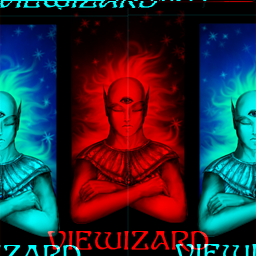
<style>
.page{position:relative;width:256px;height:256px;background:#000000}
.page>*{position:absolute;margin:0}
.t1{font:22.7px "EddaCaps";letter-spacing:0.1em;text-transform:uppercase;font-weight:bold}
</style>
<div class="page">
<p class="t1" style="left:47px;top:229px;width:162px;height:21px">viewizard</p>
</div>
